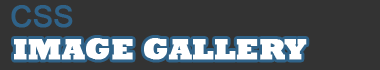
<style>
.page{position:relative;width:380px;height:70px;background:#333333}
.page>*{position:absolute;margin:0}
.t1{font:30px "ArialMT";color:#2f6288;font-weight:bold}
.t2{font:30px "Rockwell-ExtraBold";color:#ffffff;font-weight:bold}
</style>
<div class="page">
<p class="t1" style="left:11px;top:5px;width:62px;height:23px">CSS</p>
<p class="t2" style="left:14px;top:38px;width:293px;height:22px">IMAGE GALLERY</p>
</div>
